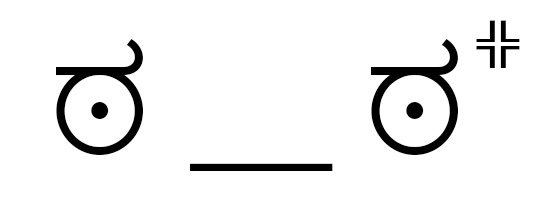
<style>
.page{position:relative;width:549px;height:215px;background:#ffffff}
.page>*{position:absolute;margin:0}
.t1{font:38.8px "ArialMT";color:#000000;scale:1.51 1}
.t2{font:142.8px "MyriadPro-Regular";color:#000000}
.t3{font:142.8px "NirmalaUI-Semilight";color:#000000}
</style>
<div class="page">
<p class="t1" style="left:476px;top:20px;width:44px;height:48px">╬</p>
<p class="t2" style="left:56px;top:39px;width:402px;height:132px"><span class="t3">ಠ </span>__ <span class="t3">ಠ</span></p>
</div>
